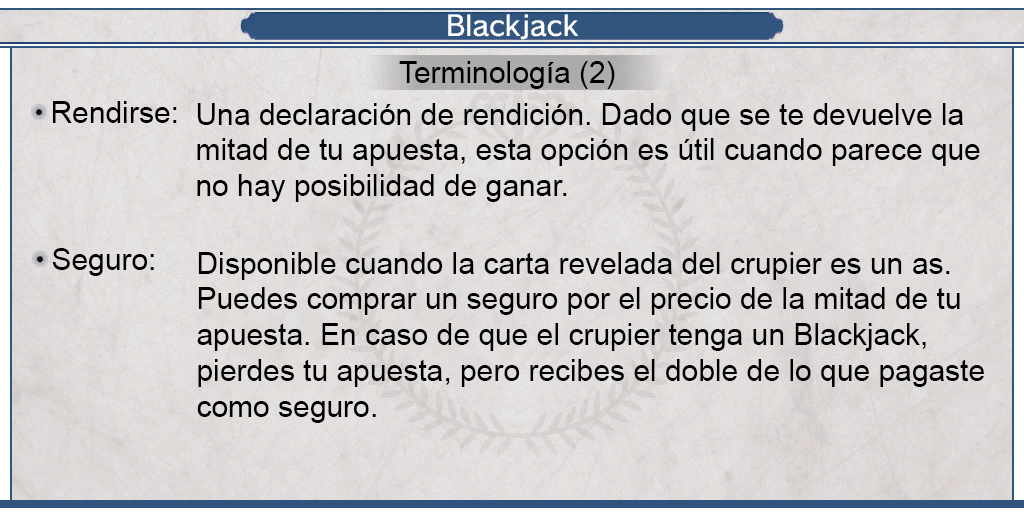
<style>
.page{position:relative;width:1024px;height:512px}
.page>*{position:absolute;margin:0}
.t1{font:30px "ArialMT";color:#000000}
.t2{font:29.9px "ArialMT";color:#000000}
</style>
<div class="page">
<p class="t1" style="left:399px;top:61px;width:216px;height:28px">Terminología (2)</p>
<p class="t2" style="left:53px;top:101px;width:124px;height:22px">Rendirse:</p>
<p class="t2" style="left:197px;top:103px;width:783px;height:99px;text-align:justify">Una declaración de rendición. Dado que se te devuelve la <br>mitad de tu apuesta, esta opción es útil cuando parece que <br>no hay posibilidad de ganar.</p>
<p class="t2" style="left:52px;top:248px;width:102px;height:28px">Seguro:</p>
<p class="t2" style="left:197px;top:252px;width:787px;height:171px;text-align:justify">Disponible cuando la carta revelada del crupier es un as.<br>Puedes comprar un seguro por el precio de la mitad de tu <br>apuesta. En caso de que el crupier tenga un Blackjack, <br>pierdes tu apuesta, pero recibes el doble de lo que pagaste <br>como seguro.</p>
</div>
